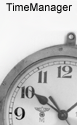
<style>
.page{position:relative;width:77px;height:125px}
.page>*{position:absolute;margin:0}
.t1{font:10.7px "ArialMT";color:#000000}
</style>
<div class="page">
<p class="t1" style="left:6px;top:3px;width:66px;height:11px">TimeManager</p>
</div>
